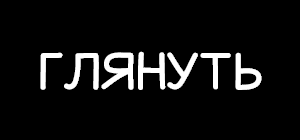
<style>
.page{position:relative;width:300px;height:140px;background:#000000}
.page>*{position:absolute;margin:0}
.t1{font:50px "HQYSaversText";letter-spacing:0.02em;color:#ffffff}
</style>
<div class="page">
<p class="t1" style="left:40px;top:51px;width:222px;height:39px">ГЛЯНУТЬ</p>
<p class="t1" style="left:42px;top:51px;width:222px;height:39px">ГЛЯНУТЬ</p>
</div>
